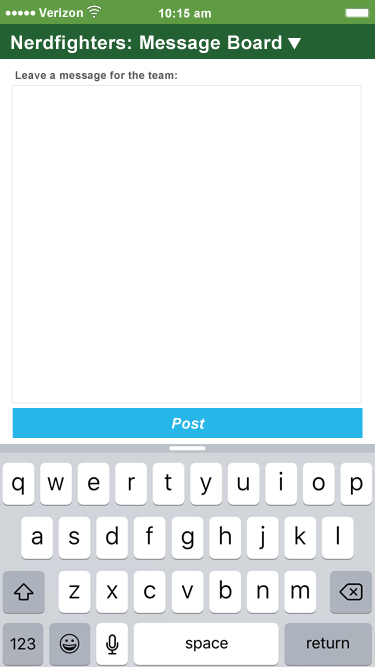
<style>
.page{position:relative;width:375px;height:667px;background:#ffffff}
.page>*{position:absolute;margin:0}
.t1{font:12px "Arial-BoldMT";letter-spacing:0.025em;color:#ffffff}
.t2{font:18.7px "Arial-BoldMT";letter-spacing:0.025em;color:#ffffff}
.t3{font:10.7px "Arial-BoldMT";letter-spacing:0.025em;color:#565656}
.t4{font:14.7px "Arial-BoldItalicMT";letter-spacing:0.025em;color:#ffffff}
</style>
<div class="page">
<p class="t1" style="left:39px;top:8px;width:44px;height:9px">Verizon</p>
<p class="t1" style="left:159px;top:8px;width:52px;height:10px">10:15 am</p>
<p class="t2" style="left:11px;top:35px;width:271px;height:18px">Nerdfighters: Message Board</p>
<p class="t3" style="left:15px;top:71px;width:162px;height:11px">Leave a message for the team:</p>
<p class="t4" style="left:171px;top:418px;width:34px;height:11px">Post</p>
</div>
